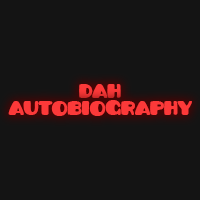
<style>
.page{position:relative;width:200px;height:200px;background:#141414}
.page>*{position:absolute;margin:0}
.t1{font:15.6px "Pusab";color:#fc3939}
</style>
<div class="page">
<p class="t1" style="left:79px;top:84px;width:42px;height:14px">Dah</p>
<p class="t1" style="left:8px;top:100px;width:184px;height:16px">autobiography</p>
</div>
